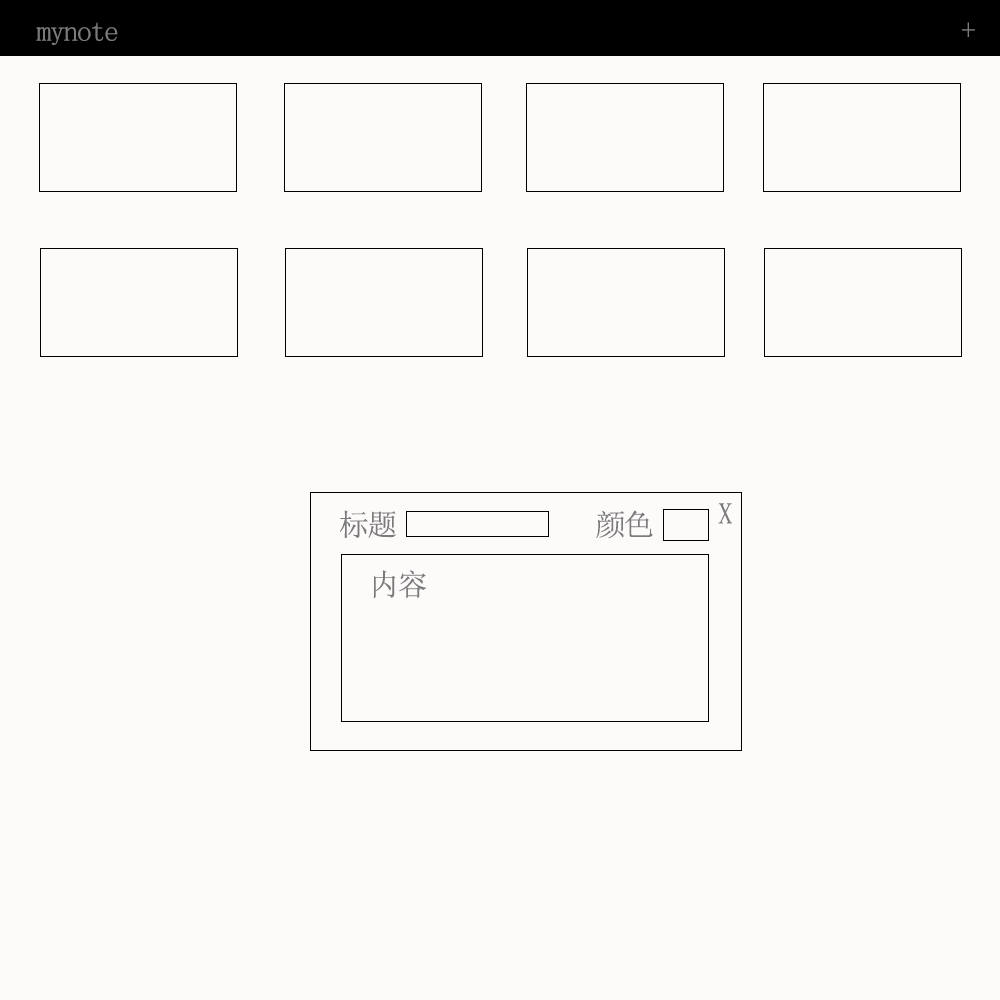
<style>
.page{position:relative;width:1000px;height:1000px;background:#fdfbfa}
.page>*{position:absolute;margin:0}
.t1{font:30px "SimSun";letter-spacing:-0.05em;color:#7b7b7b}
</style>
<div class="page">
<p class="t1" style="left:36px;top:22px;width:82px;height:24px">mynote</p>
<p class="t1" style="left:962px;top:22px;width:13px;height:15px">+</p>
<p class="t1" style="left:340px;top:510px;width:56px;height:29px">标题</p>
<p class="t1" style="left:596px;top:510px;width:57px;height:29px">颜色</p>
<p class="t1" style="left:718px;top:503px;width:14px;height:21px">X</p>
<p class="t1" style="left:373px;top:570px;width:54px;height:29px">内容</p>
</div>
